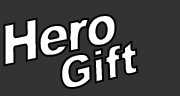
<style>
.page{position:relative;width:180px;height:96px;background:#333333}
.page>*{position:absolute;margin:0}
.t1{font:56px "Arial-Black";letter-spacing:-0.09em;font-weight:bold;font-style:italic;scale:0.87 1}
.t2{font:44px "Arial-Black";letter-spacing:-0.05em;font-weight:bold;font-style:italic;scale:0.96 1}
</style>
<div class="page">
<p class="t1" style="left:3px;top:14px;width:114px;height:53px;rotate:-12deg">Hero</p>
<p class="t2" style="left:60px;top:40px;width:79px;height:49px;rotate:-14deg">Gift</p>
</div>
